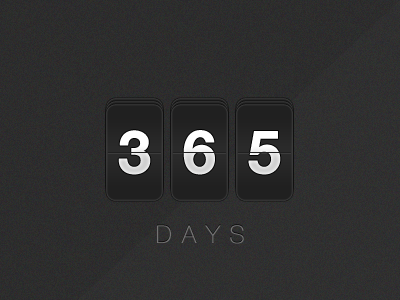
<style>
.page{position:relative;width:400px;height:300px}
.page>*{position:absolute;margin:0}
.t1{font:60px "HelveticaNeue-Bold";letter-spacing:-0.025em;color:#ededed;font-weight:bold}
.t2{font:60px "HelveticaNeue-Bold";letter-spacing:-0.025em;color:#ffffff;font-weight:bold}
.t3{font:24px "HelveticaNeue-UltraLight";letter-spacing:0.41em;color:#737373;font-weight:bold}
</style>
<div class="page">
<p class="t1" style="left:118px;top:130px;width:33px;height:45px">3</p>
<p class="t1" style="left:183px;top:130px;width:32px;height:45px">6</p>
<p class="t2" style="left:248px;top:131px;width:33px;height:44px">5</p>
<p class="t3" style="left:157px;top:225px;width:87px;height:19px">DAYS</p>
</div>
